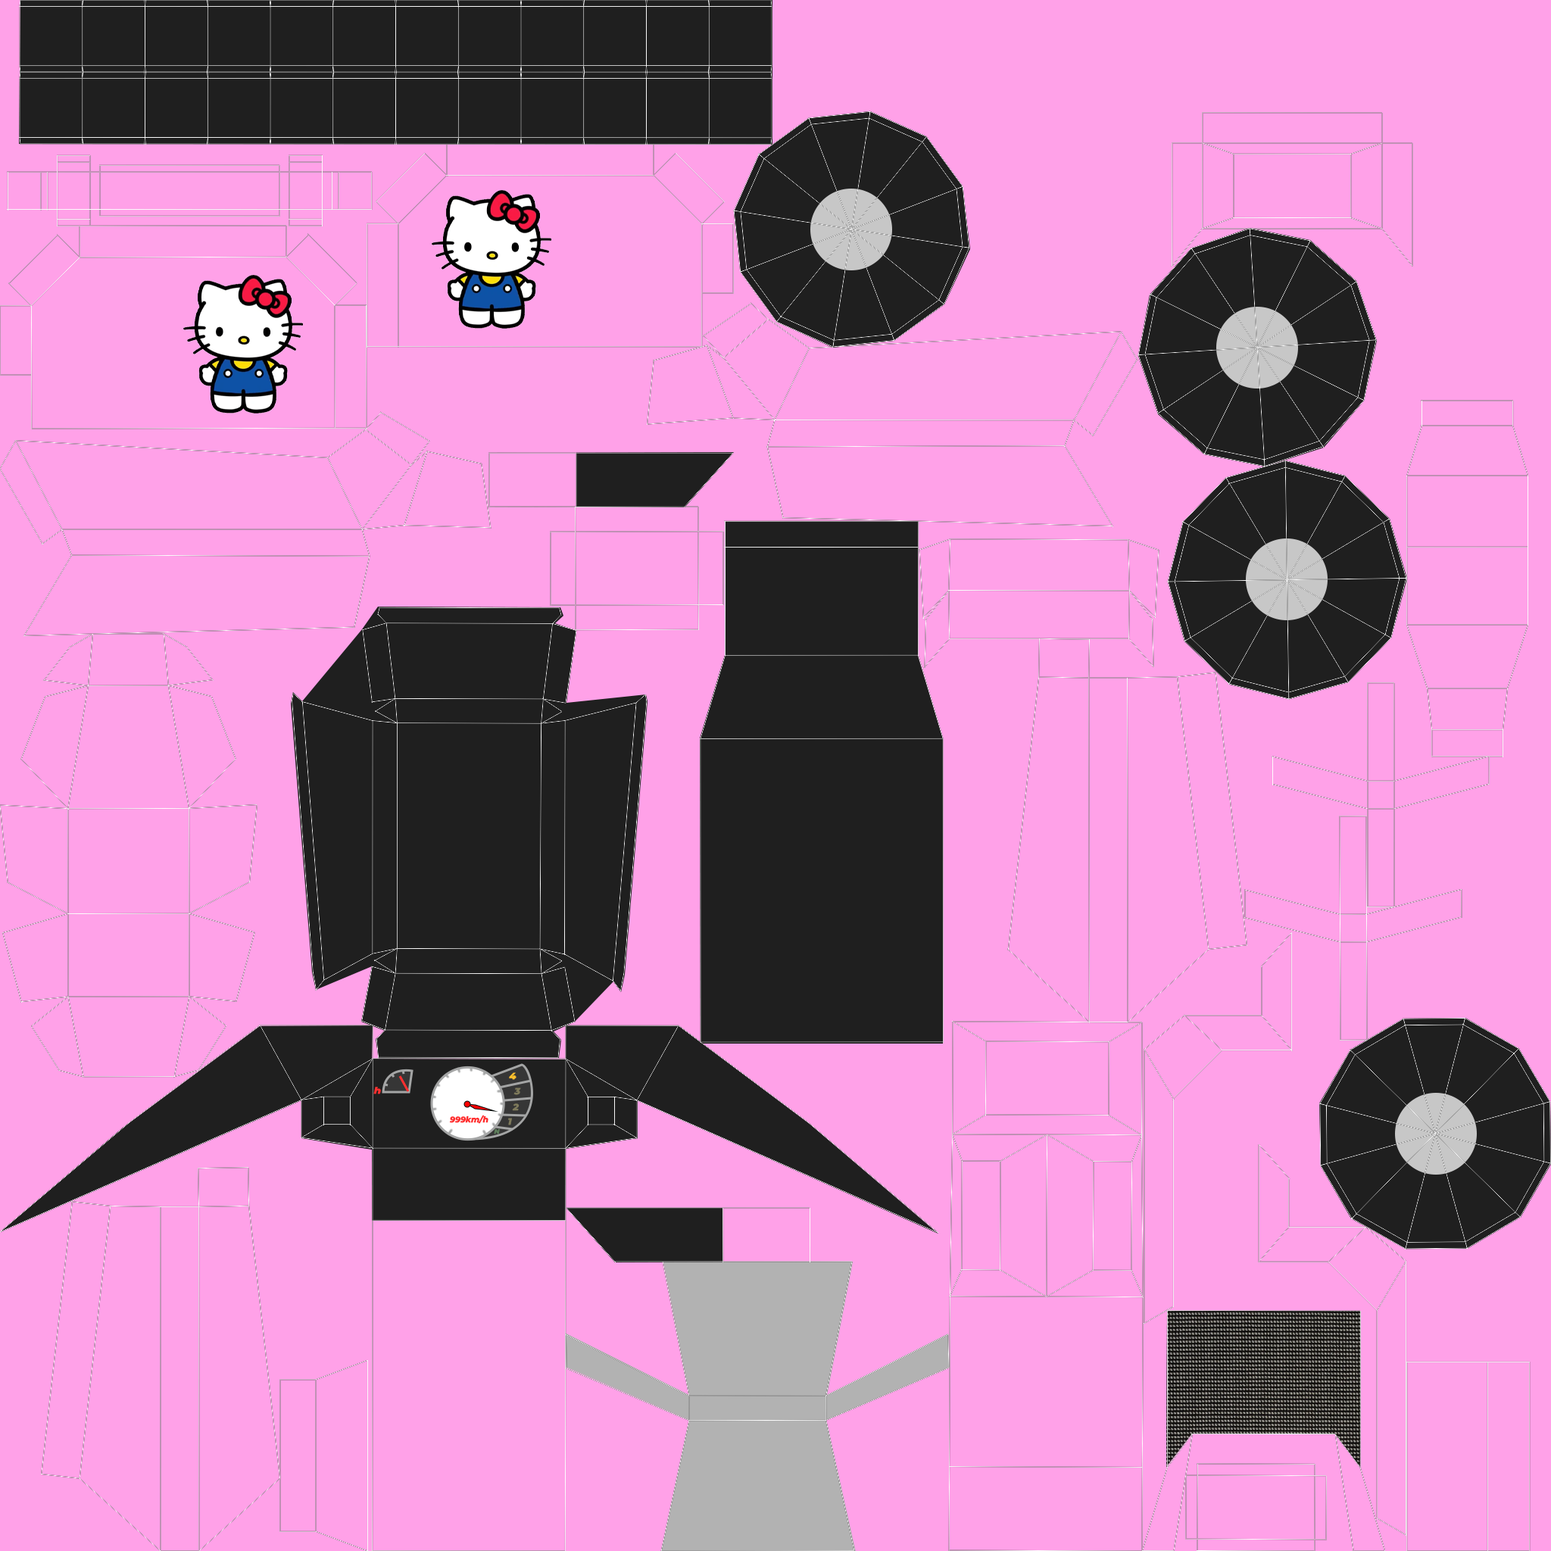
<style>
.page{position:relative;width:1551px;height:1551px;background:#ffa1e8}
.page>*{position:absolute;margin:0}
.t1{font:9px "MontserratItalic-ExtraBoldItalic";color:#ffc12c;scale:1.07 1}
.t2{font:8.6px "MontserratItalic-ExtraBoldItalic";color:#ff3030;scale:1.19 1}
.t3{font:9px "MontserratItalic-ExtraBoldItalic";color:#7e7a5b;scale:1.07 1}
.t4{font:8.1px "MontserratItalic-ExtraBoldItalic";color:#ff3030}
.t5{font:6.6px "MontserratItalic-ExtraBoldItalic";color:#5d7e5b}
</style>
<div class="page">
<p class="t1" style="left:509px;top:1072px;width:7px;height:8px">4</p>
<p class="t2" style="left:373px;top:1087px;width:8px;height:7px">h</p>
<p class="t3" style="left:513px;top:1087px;width:8px;height:8px">3</p>
<p class="t3" style="left:512px;top:1103px;width:7px;height:8px">2</p>
<p class="t4" style="left:449px;top:1115px;width:39px;height:9px">999km/h</p>
<p class="t3" style="left:508px;top:1118px;width:4px;height:7px">1</p>
<p class="t5" style="left:494px;top:1128px;width:6px;height:6px">N</p>
</div>
